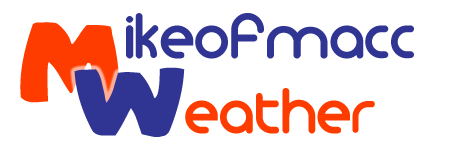
<style>
.page{position:relative;width:450px;height:150px;background:#ffffff}
.page>*{position:absolute;margin:0}
.t1{font:64px "MonoglycerideBold";color:#303593}
.t2{font:128px "CasualMarkerMF";color:#ff3c00}
.t3{font:128px "CasualMarkerMF";color:#303593}
.t4{font:64px "MonoglycerideBold";color:#ff3c00}
</style>
<div class="page">
<p class="t1" style="left:126px;top:13px;width:288px;height:46px">ikeofmacc</p>
<p class="t2" style="left:20px;top:22px;width:100px;height:81px">M</p>
<p class="t3" style="left:74px;top:67px;width:111px;height:70px">w</p>
<p class="t4" style="left:185px;top:88px;width:190px;height:46px">eather</p>
</div>
